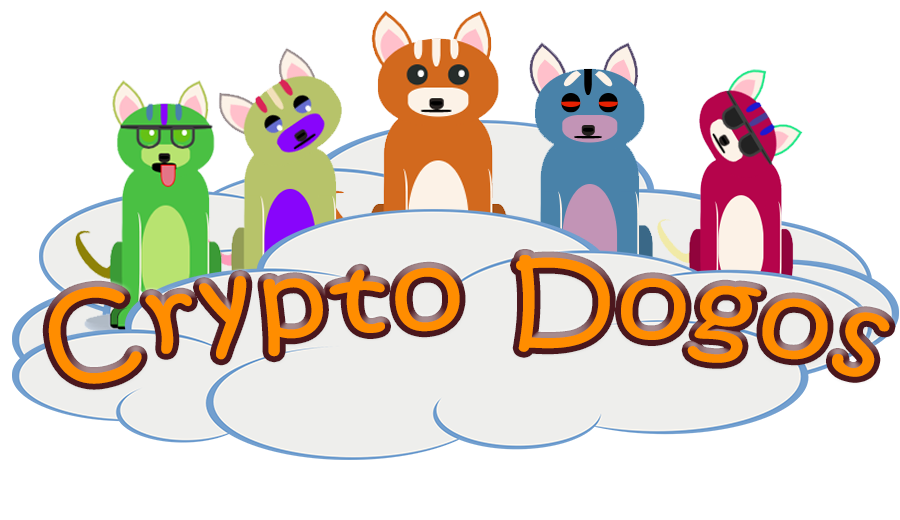
<style>
.page{position:relative;width:900px;height:520px;background:#ffffff}
.page>*{position:absolute;margin:0}
.t1{font:102.4px "KristenITC-Regular";letter-spacing:0.05em;color:#ff8d00}
</style>
<div class="page">
<p class="t1" style="left:48px;top:255px;width:842px;height:129px">Crypto Dogos</p>
</div>
